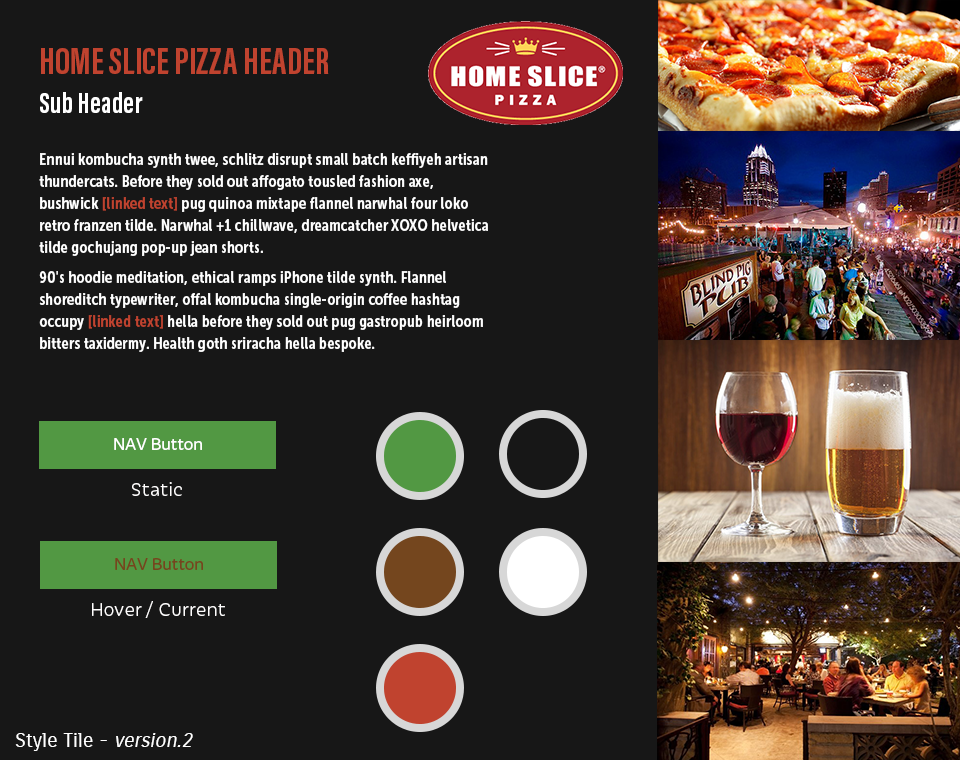
<style>
.page{position:relative;width:960px;height:760px;background:#171717}
.page>*{position:absolute;margin:0}
.t1{font:38px "AcuminProExtraCond-Bold";letter-spacing:0.01em;color:#c0432f;text-transform:uppercase}
.t2{font:30px "AcuminProExtraCond-Bold";letter-spacing:0.01em;color:#ffffff}
.t3{font:16px/22px "MuseoSansCond-700";letter-spacing:0.015em;color:#ffffff}
.t4{font:16px/22px "MuseoSansCond-700";letter-spacing:0.015em;color:#c0432f}
.t5{font:17px "TisaSansPro";color:#fefefe}
.t6{font:20px "Iskra-Light";letter-spacing:0.02em;color:#fffefe}
.t7{font:17px "TisaSansPro";color:#74461e}
.t8{font:20px "CarroisGothic-Regular";color:#ffffff}
.t9{font:20px "CarroisGothic-Regular";color:#ffffff;font-style:italic}
</style>
<div class="page">
<p class="t1" style="left:41px;top:48px;width:288px;height:26px">Home Slice Pizza Header</p>
<p class="t2" style="left:40px;top:92px;width:103px;height:21px">Sub Header</p>
<p class="t3" style="left:39px;top:153px;width:449px;height:199px">Ennui kombucha synth twee, schlitz disrupt small batch keffiyeh artisan thundercats. Before they sold out affogato tousled fashion axe, bushwick <span class="t4">[linked text] </span>pug quinoa mixtape flannel narwhal four loko retro franzen tilde. Narwhal +1 chillwave, dreamcatcher XOXO helvetica tilde gochujang pop-up jean shorts. <br>90's hoodie meditation, ethical ramps iPhone tilde synth. Flannel shoreditch typewriter, offal kombucha single-origin coffee hashtag occupy <span class="t4">[linked text] </span>hella before they sold out pug gastropub heirloom bitters taxidermy. Health goth sriracha hella bespoke.</p>
<p class="t5" style="left:114px;top:438px;width:88px;height:12px">NAV Button</p>
<p class="t6" style="left:132px;top:482px;width:50px;height:14px">Static</p>
<p class="t7" style="left:115px;top:558px;width:88px;height:12px">NAV Button</p>
<p class="t6" style="left:92px;top:601px;width:133px;height:17px">Hover / Current</p>
<p class="t8" style="left:15px;top:733px;width:178px;height:18px">Style Tile - <span class="t9">version.2</span></p>
</div>
